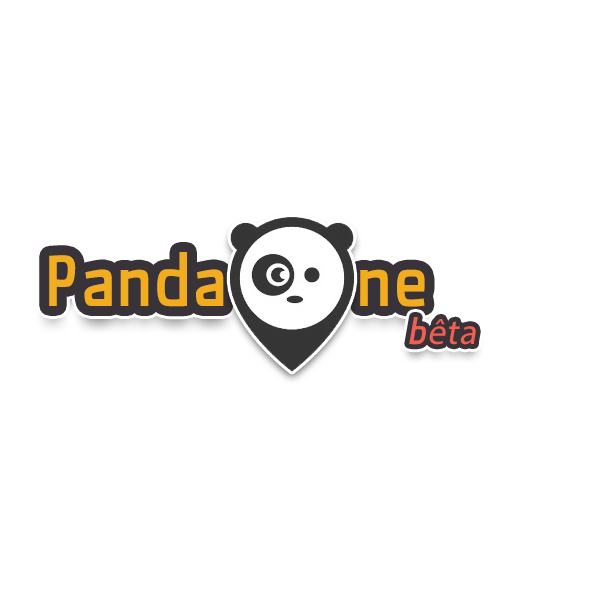
<style>
.page{position:relative;width:600px;height:600px;background:#ffffff}
.page>*{position:absolute;margin:0}
.t1{font:72px "MaterialSans-Medium";letter-spacing:0.025em;color:#f1ad1f}
.t2{font:36px "MyriadPro-Regular";letter-spacing:0.025em;color:#f05f51;font-style:italic}
.t3{font:36px "MaterialSans-Medium";letter-spacing:0.025em;color:#f05f51;font-style:italic}
</style>
<div class="page">
<p class="t1" style="left:49px;top:252px;width:175px;height:55px">Panda</p>
<p class="t1" style="left:49px;top:252px;width:175px;height:55px">Panda</p>
<p class="t1" style="left:360px;top:269px;width:65px;height:38px">ne</p>
<p class="t1" style="left:360px;top:269px;width:65px;height:38px">ne</p>
<p class="t2" style="left:409px;top:317px;width:67px;height:28px"><span class="t3">b</span>êta</p>
<p class="t2" style="left:409px;top:317px;width:67px;height:28px"><span class="t3">b</span>êta</p>
</div>
